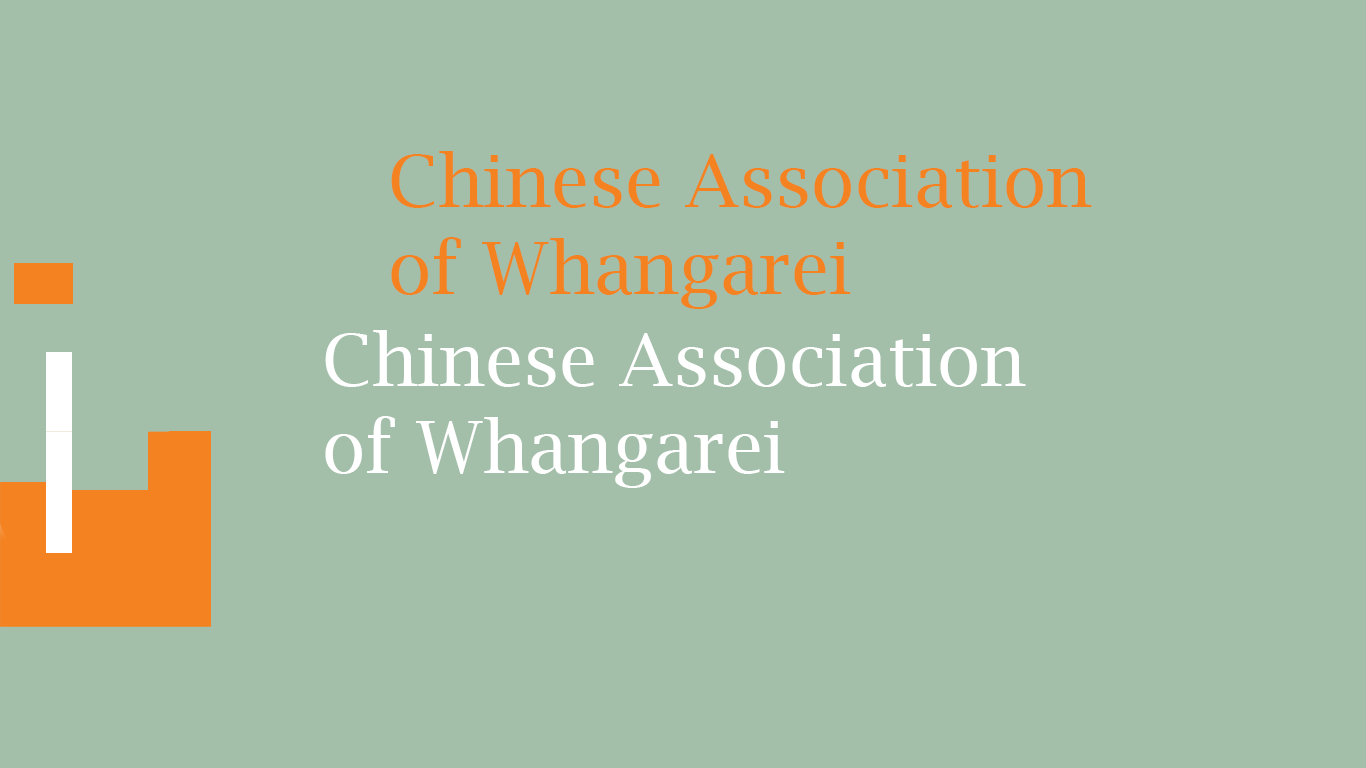
<style>
.page{position:relative;width:1366px;height:768px;background:#a3bfaa}
.page>*{position:absolute;margin:0}
.t1{font:72px "LucidaBright";color:#f58220}
.t2{font:72px "LucidaBright";color:#ffffff}
</style>
<div class="page">
<p class="t1" style="left:391px;top:151px;width:701px;height:158px">Chinese Association of Whangarei</p>
<p class="t2" style="left:325px;top:330px;width:701px;height:158px">Chinese Association of Whangarei</p>
</div>
